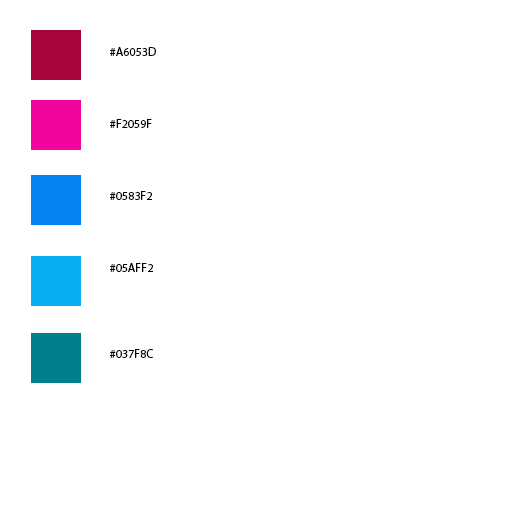
<style>
.page{position:relative;width:520px;height:520px;background:#ffffff}
.page>*{position:absolute;margin:0}
.t1{font:12px "MyriadPro-Regular";color:#000000}
</style>
<div class="page">
<p class="t1" style="left:110px;top:47px;width:46px;height:311px">#A6053D<br><br><br><br><br>#F2059F<br><br><br><br><br>#0583F2<br><br><br><br><br>#05AFF2<br><br><br><br><br><br>#037F8C</p>
</div>
